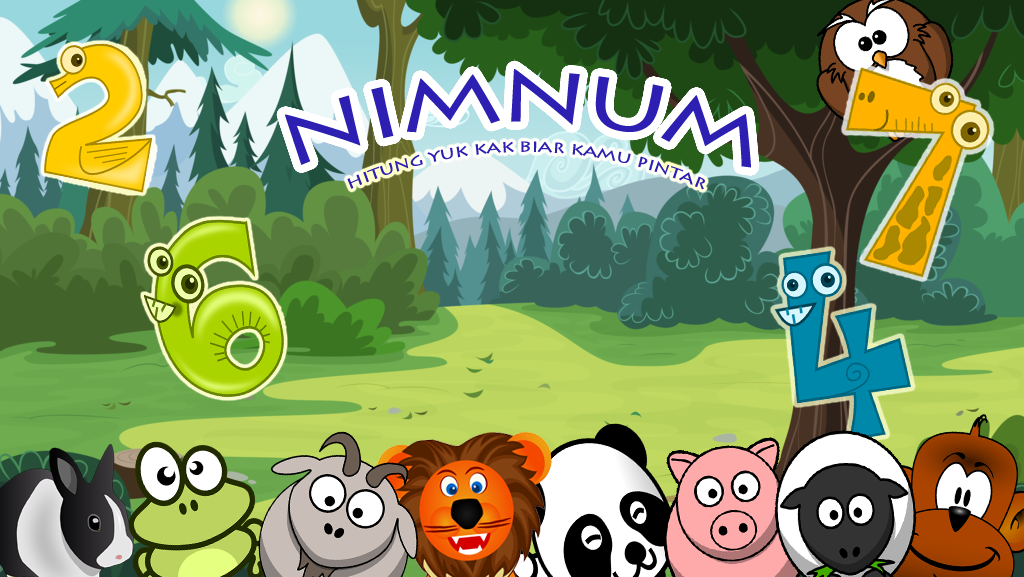
<style>
.page{position:relative;width:1024px;height:577px}
.page>*{position:absolute;margin:0}
.t1{font:83.3px "LithosPro-Regular";letter-spacing:-0.025em;color:#2d1fb1;scale:1.2 1}
.t2{font:17.3px/24.3px "LithosPro-Regular";letter-spacing:-0.025em;color:#2d1fb1;scale:1.16 1}
</style>
<div class="page">
<p class="t1" style="left:284px;top:69px;width:467px;height:99px">nimnum</p>
<p class="t2" style="left:347px;top:141px;width:358px;height:49px;text-align:center">hitung yuk kak biar kamu pintar</p>
</div>
